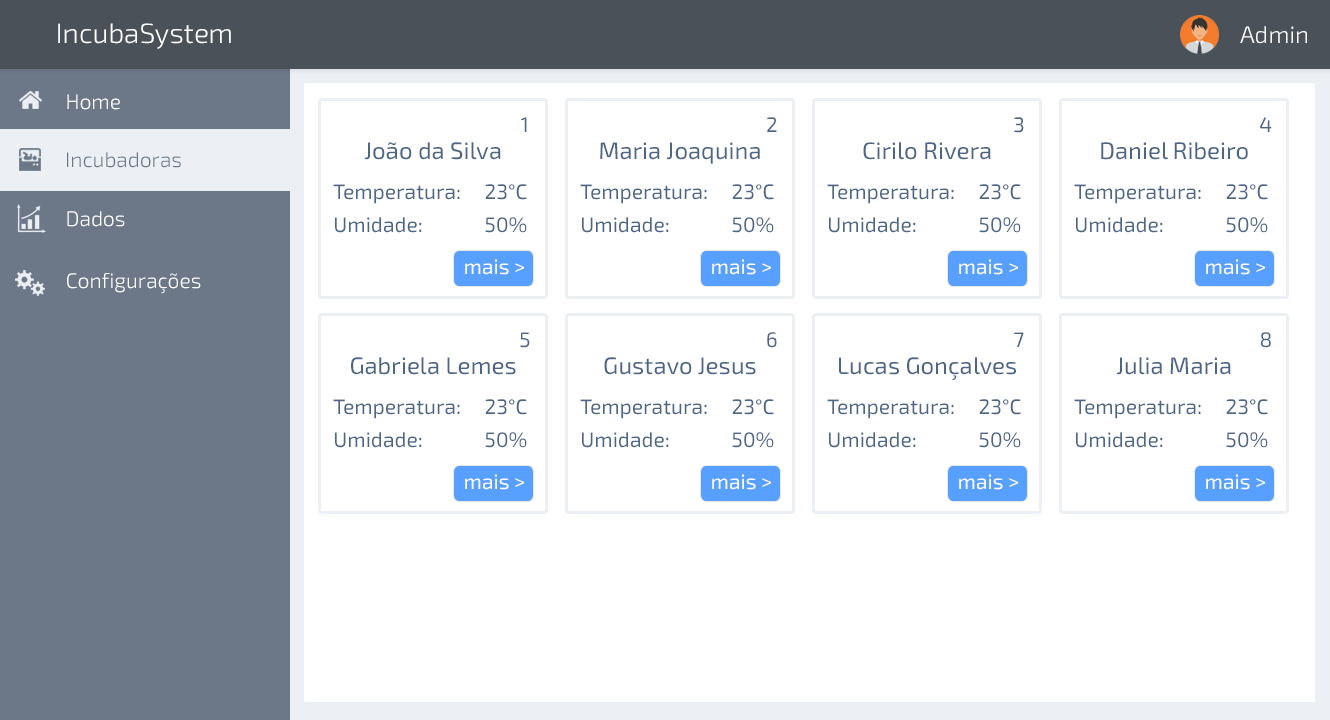
<style>
.page{position:relative;width:1330px;height:720px;background:#ffffff}
.page>*{position:absolute;margin:0}
.t1{font:28px "Exo2-Light";color:#ffffff}
.t2{font:24px "Exo2-Light";color:#ffffff}
.t3{font:21px "Exo2-Light";color:#ffffff}
.t4{font:21px "Exo2-Regular";color:#4e6686}
.t5{font:24px "Exo2-Regular";color:#4e6686}
.t6{font:21px "Exo2-Light";color:#6c7888}
.t7{font:21px "Exo2-Regular";color:#ffffff}
</style>
<div class="page">
<p class="t1" style="left:58px;top:23px;width:173px;height:26px">IncubaSystem</p>
<p class="t2" style="left:1240px;top:26px;width:67px;height:18px">Admin</p>
<p class="t3" style="left:67px;top:94px;width:53px;height:16px">Home</p>
<p class="t4" style="left:521px;top:117px;width:6px;height:15px">1</p>
<p class="t4" style="left:767px;top:117px;width:10px;height:15px">2</p>
<p class="t4" style="left:1014px;top:117px;width:10px;height:16px">3</p>
<p class="t4" style="left:1260px;top:117px;width:12px;height:15px">4</p>
<p class="t5" style="left:364px;top:142px;width:137px;height:18px">João da Silva</p>
<p class="t5" style="left:600px;top:142px;width:160px;height:22px">Maria Joaquina</p>
<p class="t5" style="left:863px;top:142px;width:128px;height:18px">Cirilo Rivera</p>
<p class="t5" style="left:1101px;top:142px;width:147px;height:18px">Daniel Ribeiro</p>
<p class="t6" style="left:67px;top:152px;width:114px;height:16px">Incubadoras</p>
<p class="t4" style="left:333px;top:184px;width:127px;height:20px">Temperatura:</p>
<p class="t4" style="left:485px;top:184px;width:42px;height:16px">23°C</p>
<p class="t4" style="left:580px;top:184px;width:127px;height:20px">Temperatura:</p>
<p class="t4" style="left:732px;top:184px;width:42px;height:16px">23°C</p>
<p class="t4" style="left:827px;top:184px;width:127px;height:20px">Temperatura:</p>
<p class="t4" style="left:979px;top:184px;width:42px;height:16px">23°C</p>
<p class="t4" style="left:1074px;top:184px;width:127px;height:20px">Temperatura:</p>
<p class="t4" style="left:1226px;top:184px;width:42px;height:16px">23°C</p>
<p class="t3" style="left:67px;top:211px;width:58px;height:16px">Dados</p>
<p class="t4" style="left:335px;top:217px;width:87px;height:16px">Umidade:</p>
<p class="t4" style="left:485px;top:217px;width:42px;height:16px">50%</p>
<p class="t4" style="left:582px;top:217px;width:87px;height:16px">Umidade:</p>
<p class="t4" style="left:732px;top:217px;width:42px;height:16px">50%</p>
<p class="t4" style="left:829px;top:217px;width:87px;height:16px">Umidade:</p>
<p class="t4" style="left:979px;top:217px;width:42px;height:16px">50%</p>
<p class="t4" style="left:1076px;top:217px;width:87px;height:16px">Umidade:</p>
<p class="t4" style="left:1226px;top:217px;width:42px;height:16px">50%</p>
<p class="t7" style="left:465px;top:259px;width:59px;height:16px">mais &gt;</p>
<p class="t7" style="left:712px;top:259px;width:59px;height:16px">mais &gt;</p>
<p class="t7" style="left:959px;top:259px;width:59px;height:16px">mais &gt;</p>
<p class="t7" style="left:1206px;top:259px;width:59px;height:16px">mais &gt;</p>
<p class="t3" style="left:67px;top:273px;width:134px;height:21px">Configurações</p>
<p class="t4" style="left:520px;top:332px;width:10px;height:16px">5</p>
<p class="t4" style="left:767px;top:332px;width:10px;height:16px">6</p>
<p class="t4" style="left:1014px;top:332px;width:10px;height:15px">7</p>
<p class="t4" style="left:1261px;top:332px;width:10px;height:16px">8</p>
<p class="t5" style="left:351px;top:357px;width:165px;height:18px">Gabriela Lemes</p>
<p class="t5" style="left:604px;top:357px;width:152px;height:18px">Gustavo Jesus</p>
<p class="t5" style="left:839px;top:357px;width:177px;height:23px">Lucas Gonçalves</p>
<p class="t5" style="left:1116px;top:357px;width:115px;height:18px">Julia Maria</p>
<p class="t4" style="left:333px;top:399px;width:127px;height:20px">Temperatura:</p>
<p class="t4" style="left:485px;top:399px;width:42px;height:16px">23°C</p>
<p class="t4" style="left:580px;top:399px;width:127px;height:20px">Temperatura:</p>
<p class="t4" style="left:732px;top:399px;width:42px;height:16px">23°C</p>
<p class="t4" style="left:827px;top:399px;width:127px;height:20px">Temperatura:</p>
<p class="t4" style="left:979px;top:399px;width:42px;height:16px">23°C</p>
<p class="t4" style="left:1074px;top:399px;width:127px;height:20px">Temperatura:</p>
<p class="t4" style="left:1226px;top:399px;width:42px;height:16px">23°C</p>
<p class="t4" style="left:335px;top:432px;width:87px;height:16px">Umidade:</p>
<p class="t4" style="left:485px;top:432px;width:42px;height:16px">50%</p>
<p class="t4" style="left:582px;top:432px;width:87px;height:16px">Umidade:</p>
<p class="t4" style="left:732px;top:432px;width:42px;height:16px">50%</p>
<p class="t4" style="left:829px;top:432px;width:87px;height:16px">Umidade:</p>
<p class="t4" style="left:979px;top:432px;width:42px;height:16px">50%</p>
<p class="t4" style="left:1076px;top:432px;width:87px;height:16px">Umidade:</p>
<p class="t4" style="left:1226px;top:432px;width:42px;height:16px">50%</p>
<p class="t7" style="left:465px;top:474px;width:59px;height:16px">mais &gt;</p>
<p class="t7" style="left:712px;top:474px;width:59px;height:16px">mais &gt;</p>
<p class="t7" style="left:959px;top:474px;width:59px;height:16px">mais &gt;</p>
<p class="t7" style="left:1206px;top:474px;width:59px;height:16px">mais &gt;</p>
</div>
